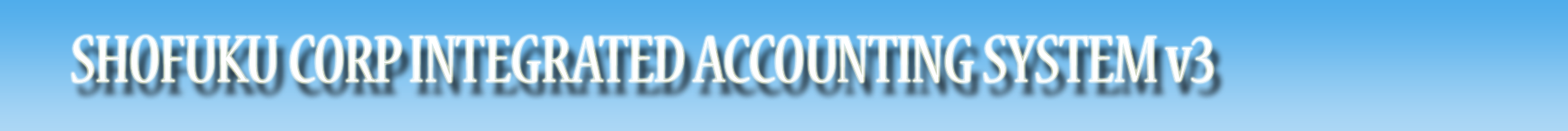
<style>
.page{position:relative;width:1568px;height:131px}
.page>*{position:absolute;margin:0}
.t1{font:72.6px "NuevaStd-Cond";color:#ffffff}
</style>
<div class="page">
<p class="t1" style="left:72px;top:36px;width:1141px;height:46px">SHOFUKU CORP INTEGRATED ACCOUNTING SYSTEM v3</p>
</div>
